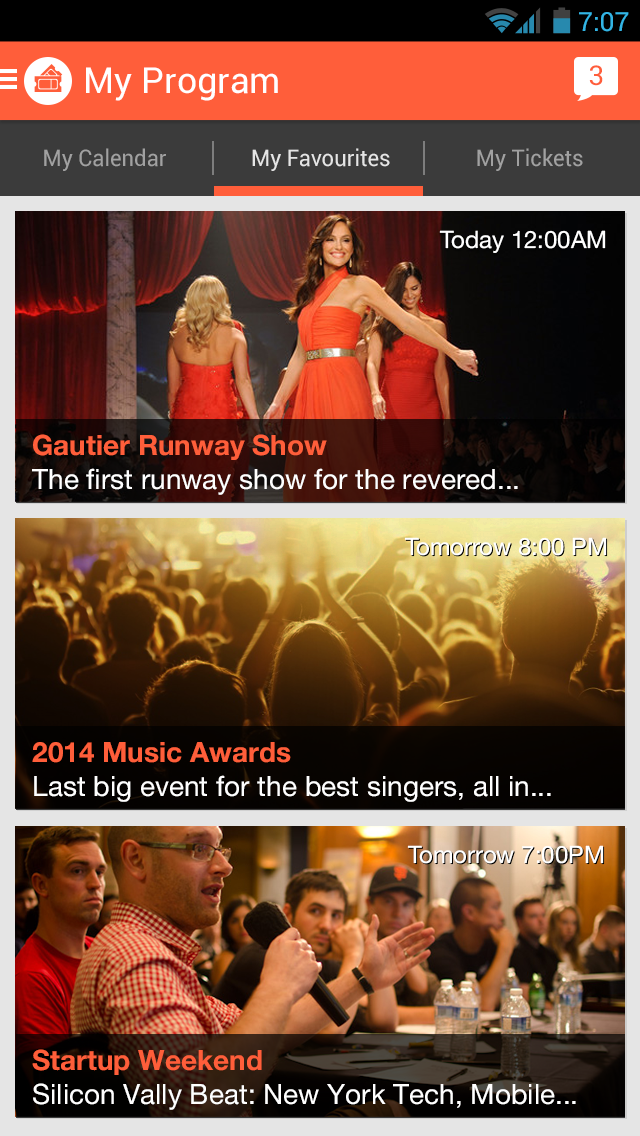
<style>
.page{position:relative;width:640px;height:1136px}
.page>*{position:absolute;margin:0}
.t1{font:26.6px "Roboto-Regular";color:#33b5e5}
.t2{font:27.4px "Roboto-Regular";color:#ff5e3a}
.t3{font:35.8px "Roboto-Regular";color:#ffffff}
.t4{font:23px "Roboto-Regular";color:#a1a1a1;scale:0.96 1}
.t5{font:23px "Roboto-Regular";color:#e5e5e5;scale:0.96 1}
.t6{font:24px "HelveticaNeue";color:#ffffff}
.t7{font:28px "HelveticaNeue";color:#ffffff}
.t8{font:28px "HelveticaNeue-Bold";color:#ff5e3a}
</style>
<div class="page">
<p class="t1" style="left:579px;top:12px;width:50px;height:20px">7:07</p>
<p class="t2" style="left:589px;top:65px;width:14px;height:21px">3</p>
<p class="t3" style="left:86px;top:67px;width:192px;height:34px">My Program</p>
<p class="t4" style="left:44px;top:148px;width:122px;height:23px">My Calendar</p>
<p class="t5" style="left:252px;top:148px;width:138px;height:23px">My Favourites</p>
<p class="t4" style="left:477px;top:148px;width:106px;height:23px">My Tickets</p>
<p class="t6" style="left:439px;top:230px;width:167px;height:23px">Today 12:00AM</p>
<p class="t7" style="left:32px;top:434px;width:486px;height:61px"><span class="t8">Gautier Runway Show<br></span>The first runway show for the revered...</p>
<p class="t6" style="left:404px;top:537px;width:203px;height:19px">Tomorrow 8:00 PM</p>
<p class="t7" style="left:32px;top:742px;width:519px;height:60px"><span class="t8">2014 Music Awards<br></span>Last big event for the best singers, all in...</p>
<p class="t6" style="left:407px;top:845px;width:197px;height:19px">Tomorrow 7:00PM</p>
<p class="t7" style="left:32px;top:1049px;width:544px;height:61px"><span class="t8">Startup Weekend<br></span>Silicon Vally Beat: New York Tech, Mobile...</p>
</div>
